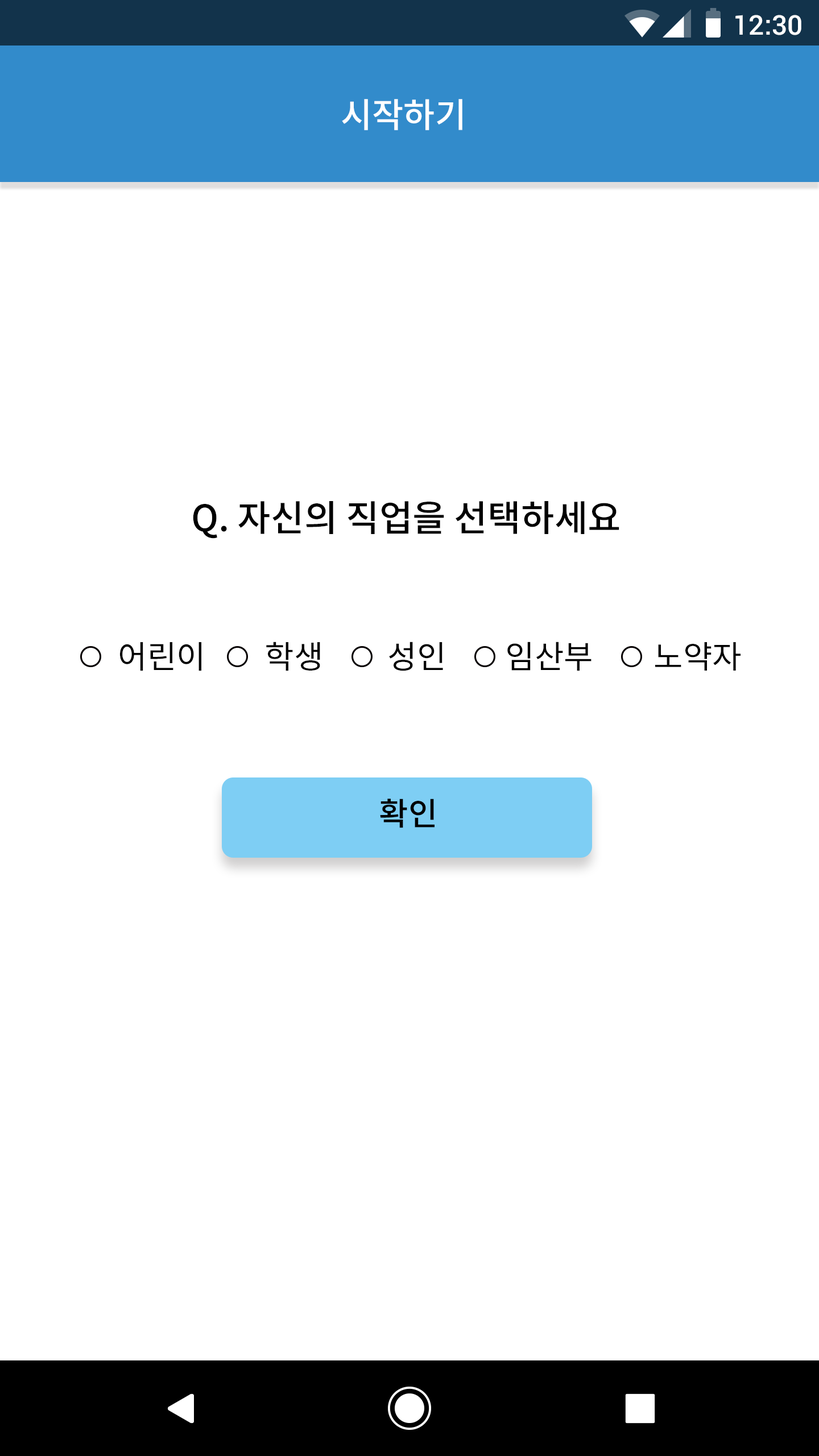
<style>
.page{position:relative;width:819px;height:1456px;background:#ffffff}
.page>*{position:absolute;margin:0}
.t1{font:27.3px "Roboto-Medium";color:#ffffff}
.t2{font:34.2px "NotoSansCJKkr-Medium";color:#ffffff}
.t3{font:36.4px "NotoSansCJKkr-Medium";color:#000000}
.t4{font:31.8px "NotoSansCJKkr-Regular";color:#000000}
.t5{font:31.9px "NotoSansCJKkr-Regular";color:#000000}
.t6{font:31.8px "NotoSansCJKkr-Medium";color:#000000}
</style>
<div class="page">
<p class="t1" style="left:735px;top:15px;width:66px;height:20px">12:30</p>
<p class="t2" style="left:342px;top:99px;width:120px;height:31px">시작하기</p>
<p class="t3" style="left:193px;top:501px;width:426px;height:38px">Q. 자신의 직업을 선택하세요</p>
<p class="t4" style="left:266px;top:642px;width:54px;height:29px">학생</p>
<p class="t4" style="left:389px;top:642px;width:54px;height:29px">성인</p>
<p class="t5" style="left:507px;top:642px;width:84px;height:29px">임산부</p>
<p class="t4" style="left:120px;top:642px;width:81px;height:29px">어린이</p>
<p class="t5" style="left:655px;top:642px;width:86px;height:29px">노약자</p>
<p class="t6" style="left:380px;top:799px;width:55px;height:29px">확인</p>
</div>
